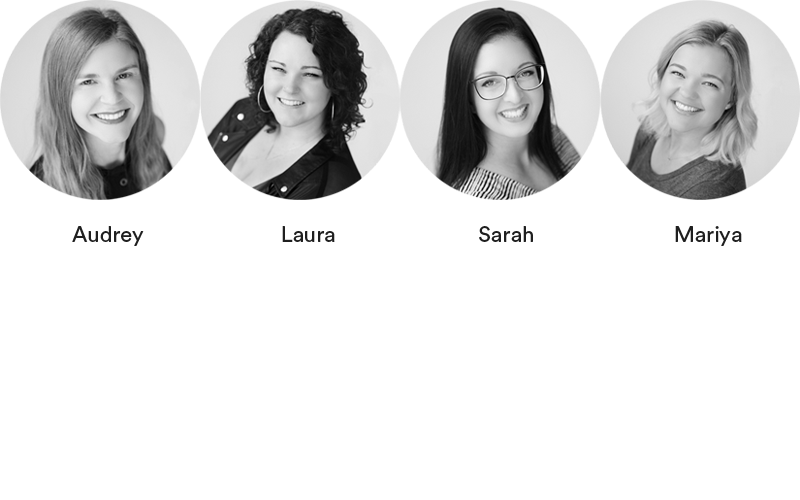
<style>
.page{position:relative;width:800px;height:500px;background:#ffffff}
.page>*{position:absolute;margin:0}
.t1{font:22px "CircularStd-Book";color:#1f1f1f}
</style>
<div class="page">
<p class="t1" style="left:72px;top:226px;width:72px;height:20px">Audrey</p>
<p class="t1" style="left:282px;top:226px;width:53px;height:16px">Laura</p>
<p class="t1" style="left:479px;top:226px;width:54px;height:16px">Sarah</p>
<p class="t1" style="left:675px;top:226px;width:67px;height:20px">Mariya</p>
</div>
